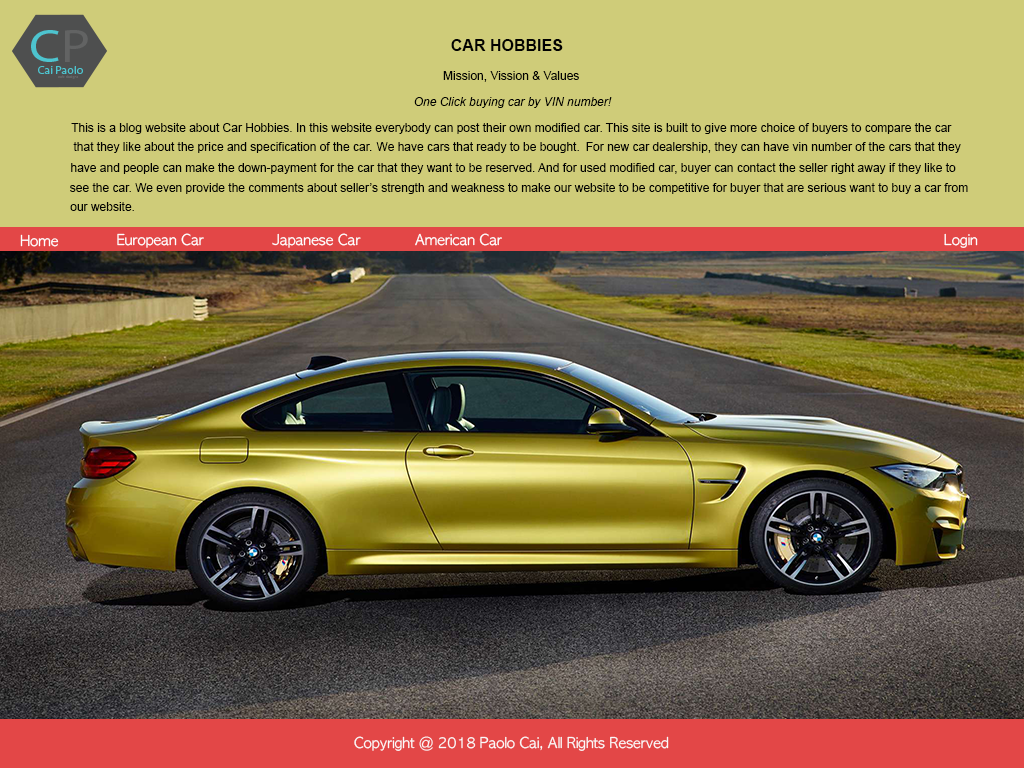
<style>
.page{position:relative;width:1024px;height:768px;background:#cfcc79}
.page>*{position:absolute;margin:0}
.t1{font:16px "Arial-BoldMT";color:#020202}
.t2{font:12px "ArialMT";color:#020202}
.t3{font:12px "Arial-ItalicMT";color:#020202}
.t4{font:14px "AppleGothic";color:#ffffff}
.t5{font:14px "AppleGothic";color:#fbf9f9}
</style>
<div class="page">
<p class="t1" style="left:451px;top:39px;width:112px;height:12px">CAR HOBBIES</p>
<p class="t2" style="left:443px;top:71px;width:136px;height:11px">Mission, Vission &amp; Values</p>
<p class="t3" style="left:414px;top:97px;width:198px;height:11px">One Click buying car by VIN number!</p>
<p class="t2" style="left:71px;top:123px;width:881px;height:11px">This is a blog website about Car Hobbies. In this website everybody can post their own modified car. This site is built to give more choice of buyers to compare the car</p>
<p class="t2" style="left:73px;top:142px;width:299px;height:11px">that they like about the price and specification of the car.</p>
<p class="t2" style="left:376px;top:142px;width:203px;height:11px">We have cars that ready to be bought.</p>
<p class="t2" style="left:586px;top:142px;width:375px;height:11px">For new car dealership, they can have vin number of the cars that they</p>
<p class="t2" style="left:71px;top:163px;width:885px;height:11px">have and people can make the down-payment for the car that they want to be reserved. And for used modified car, buyer can contact the seller right away if they like to</p>
<p class="t2" style="left:70px;top:183px;width:898px;height:11px">see the car. We even provide the comments about seller’s strength and weakness to make our website to be competitive for buyer that are serious want to buy a car from</p>
<p class="t2" style="left:70px;top:202px;width:64px;height:9px">our website.</p>
<p class="t4" style="left:117px;top:233px;width:87px;height:15px">European Car</p>
<p class="t4" style="left:272px;top:233px;width:89px;height:15px">Japanese Car</p>
<p class="t4" style="left:415px;top:233px;width:87px;height:13px">American Car</p>
<p class="t4" style="left:944px;top:233px;width:34px;height:15px">Login</p>
<p class="t4" style="left:20px;top:234px;width:39px;height:13px">Home</p>
<p class="t5" style="left:354px;top:736px;width:315px;height:15px">Copyright @ 2018 Paolo Cai, All Rights Reserved</p>
</div>
